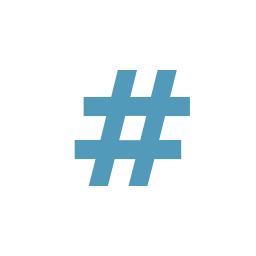
<style>
.page{position:relative;width:256px;height:256px;background:#ffffff}
.page>*{position:absolute;margin:0}
.t1{font:160px "Verdana-Bold";color:#519aba}
</style>
<div class="page">
<p class="t1" style="left:74px;top:70px;width:116px;height:116px">#</p>
</div>
